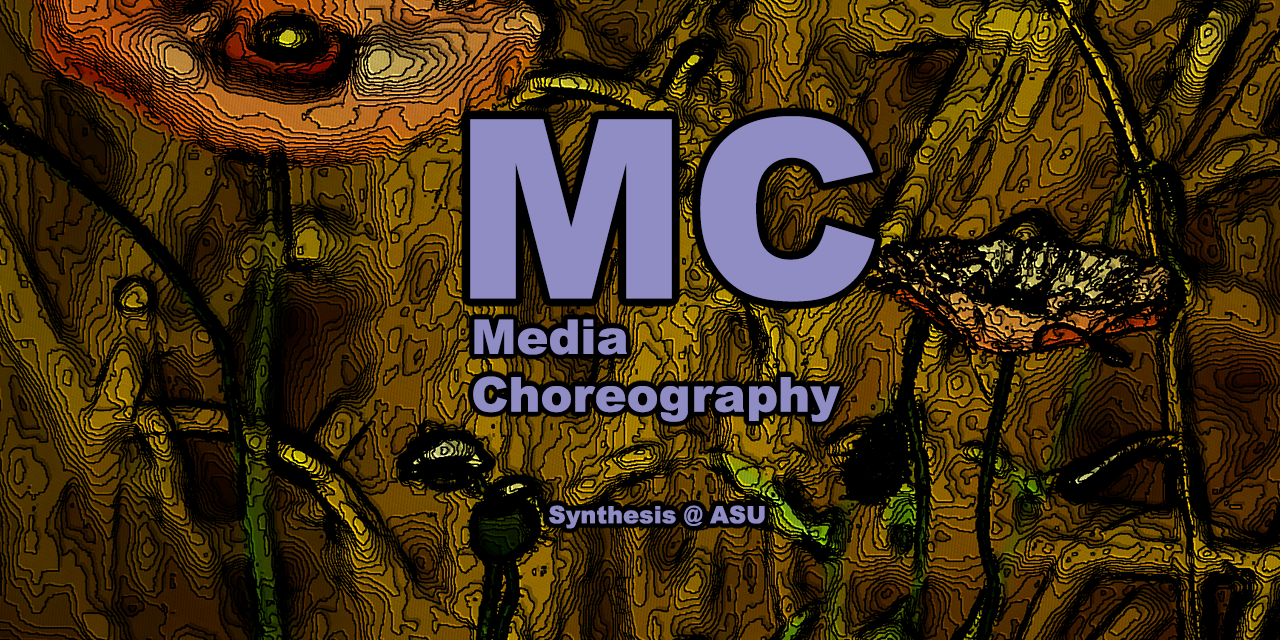
<style>
.page{position:relative;width:1280px;height:640px;background:#000000}
.page>*{position:absolute;margin:0}
.t1{font:250px "Arial-Black";color:#908dc5}
.t2{font:48px "Arial-Black";color:#908dc5}
.t3{font:24px "Arial-Black";color:#908dc5}
</style>
<div class="page">
<p class="t1" style="left:470px;top:116px;width:405px;height:186px">MC</p>
<p class="t2" style="left:473px;top:319px;width:367px;height:103px">Media<br>Choreography</p>
<p class="t3" style="left:549px;top:505px;width:216px;height:24px">Synthesis @ ASU</p>
</div>
